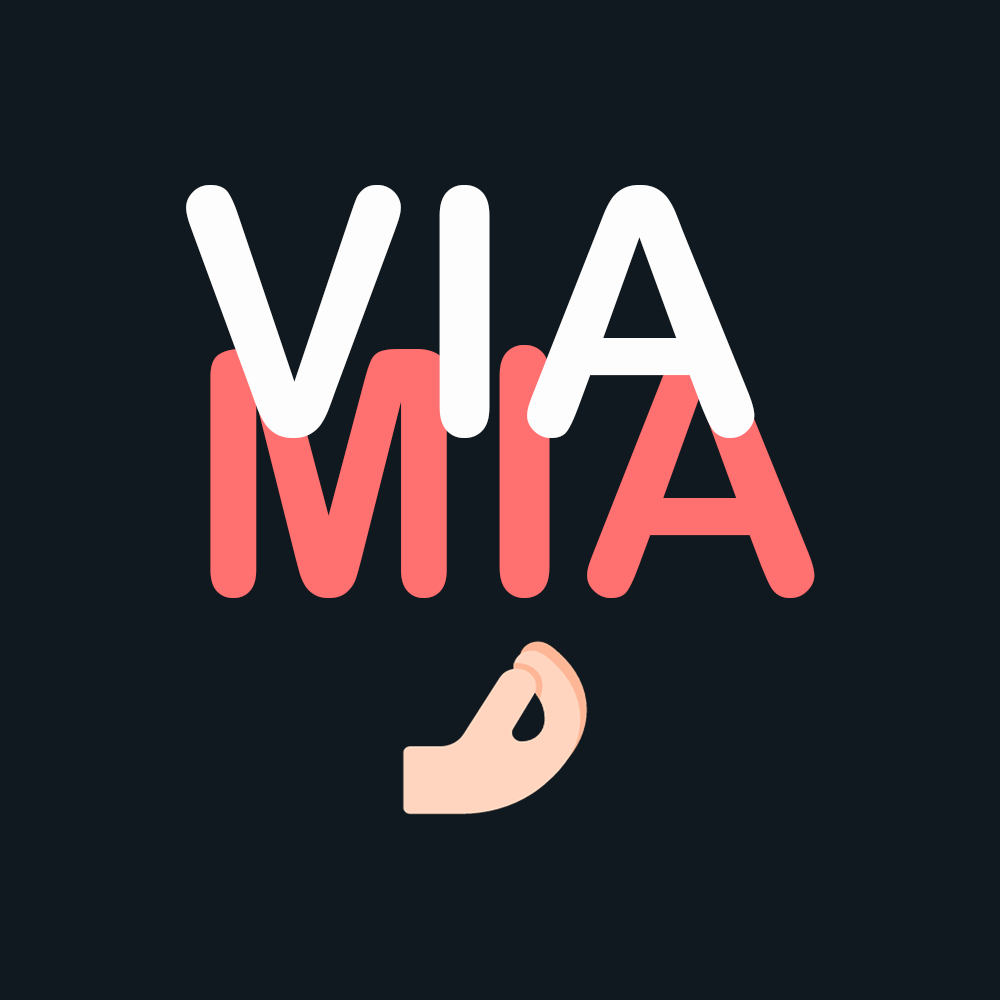
<style>
.page{position:relative;width:1000px;height:1000px;background:#0f191f}
.page>*{position:absolute;margin:0}
.t1{font:341.7px "ArialRoundedMTBold";color:#fdfdfd}
.t2{font:341.7px "ArialRoundedMTBold";color:#ff7070}
</style>
<div class="page">
<p class="t1" style="left:186px;top:185px;width:569px;height:253px">VIA</p>
<p class="t2" style="left:210px;top:345px;width:605px;height:253px">MIA</p>
</div>
